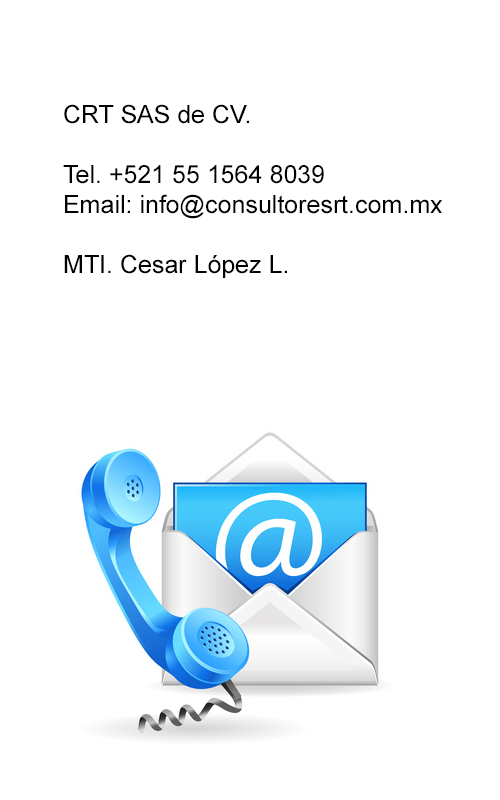
<style>
.page{position:relative;width:500px;height:800px;background:#ffffff}
.page>*{position:absolute;margin:0}
.t1{font:25px "ArialMT";color:#000000}
</style>
<div class="page">
<p class="t1" style="left:63px;top:104px;width:379px;height:174px">CRT SAS de CV.<br><br>Tel. +521 55 1564 8039<br>Email: info@consultoresrt.com.mx<br><br>MTI. Cesar López L.</p>
</div>
